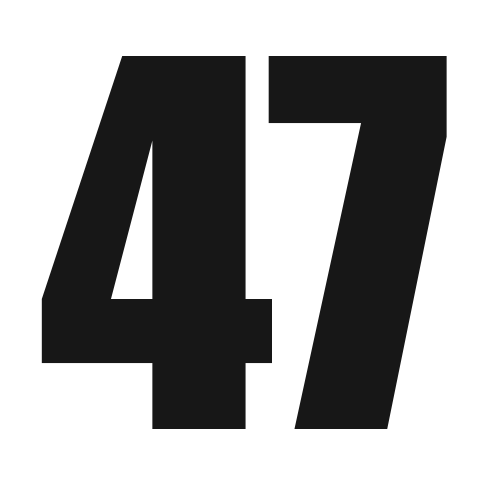
<style>
.page{position:relative;width:480px;height:480px;background:#ffffff}
.page>*{position:absolute;margin:0}
.t1{font:472.3px "Impact";color:#171717}
</style>
<div class="page">
<p class="t1" style="left:41px;top:56px;width:406px;height:373px">47</p>
</div>
